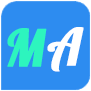
<style>
.page{position:relative;width:91px;height:91px;background:#2d8cf0}
.page>*{position:absolute;margin:0}
.t1{font:50.7px "Lobster-Regular";color:#2df5be;font-weight:bold}
.t2{font:50.7px "Lobster-Regular";color:#ffffff;font-weight:bold}
</style>
<div class="page">
<p class="t1" style="left:7px;top:28px;width:40px;height:39px">M</p>
<p class="t2" style="left:47px;top:27px;width:37px;height:45px">A</p>
</div>
